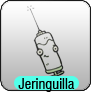
<style>
.page{position:relative;width:92px;height:92px}
.page>*{position:absolute;margin:0}
.t1{font:14.7px "Swiss721BT-RomanCondensed";color:#000000}
</style>
<div class="page">
<p class="t1" style="left:18px;top:78px;width:57px;height:14px">Jeringuilla</p>
</div>
